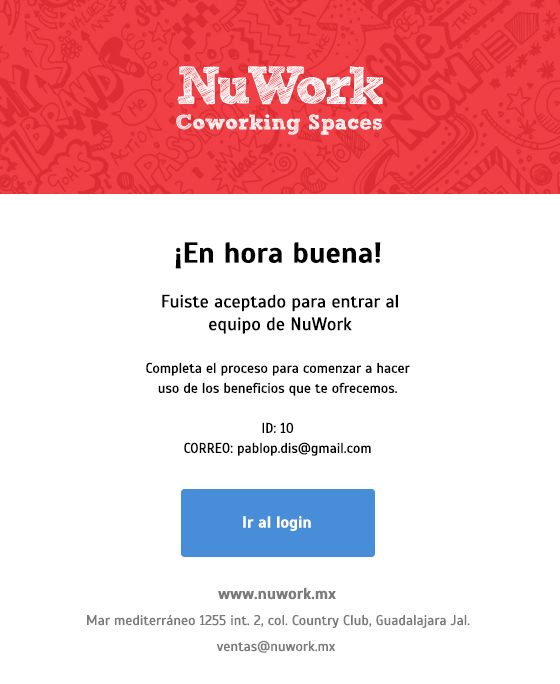
<style>
.page{position:relative;width:560px;height:684px;background:#ffffff}
.page>*{position:absolute;margin:0}
.t1{font:29px "Scada-Bold";color:#010101}
.t2{font:18.1px/22.6px "Scada-Regular";color:#000000}
.t3{font:14px/20px "Scada-Regular";color:#000000}
.t4{font:15.9px "Scada-Bold";color:#ffffff}
.t5{font:16px "Scada-Bold";color:#7b7a7a}
.t6{font:14px "Scada-Regular";color:#7b7a7a}
</style>
<div class="page">
<p class="t1" style="left:175px;top:242px;width:206px;height:27px">¡En hora buena!</p>
<p class="t2" style="left:162px;top:294px;width:236px;height:40px;text-align:center">Fuiste aceptado para entrar al<br>equipo de NuWork</p>
<p class="t3" style="left:146px;top:362px;width:264px;height:94px;text-align:center">Completa el proceso para comenzar a hacer uso de los beneficios que te ofrecemos.<br><br>ID: 10<br>CORREO: pablop.dis@gmail.com</p>
<p class="t4" style="left:243px;top:516px;width:68px;height:15px">Ir al login</p>
<p class="t5" style="left:218px;top:587px;width:118px;height:13px">www.nuwork.mx</p>
<p class="t6" style="left:87px;top:615px;width:383px;height:13px">Mar mediterráneo 1255 int. 2, col. Country Club, Guadalajara Jal.</p>
<p class="t6" style="left:216px;top:640px;width:120px;height:13px">ventas@nuwork.mx</p>
</div>
